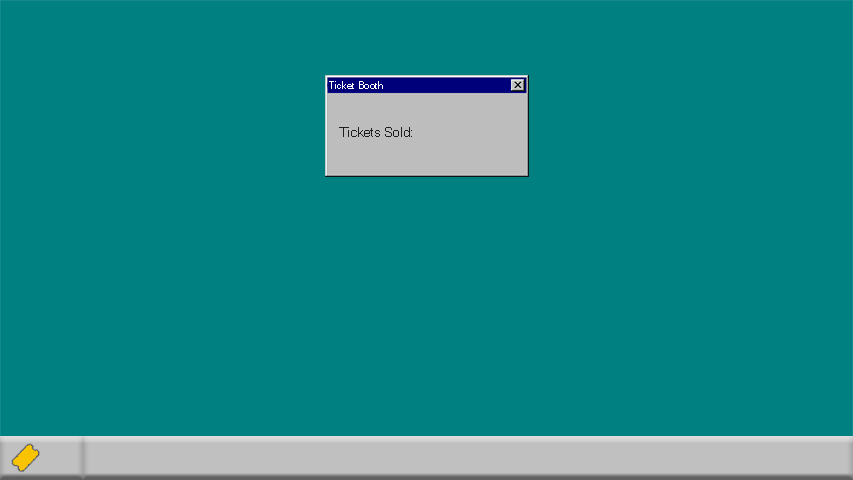
<style>
.page{position:relative;width:853px;height:480px;background:#008081}
.page>*{position:absolute;margin:0}
.t1{font:12.9px "MicrosoftSansSerif";color:#1e1e1e}
</style>
<div class="page">
<p class="t1" style="left:339px;top:127px;width:73px;height:10px">Tickets Sold:</p>
</div>
